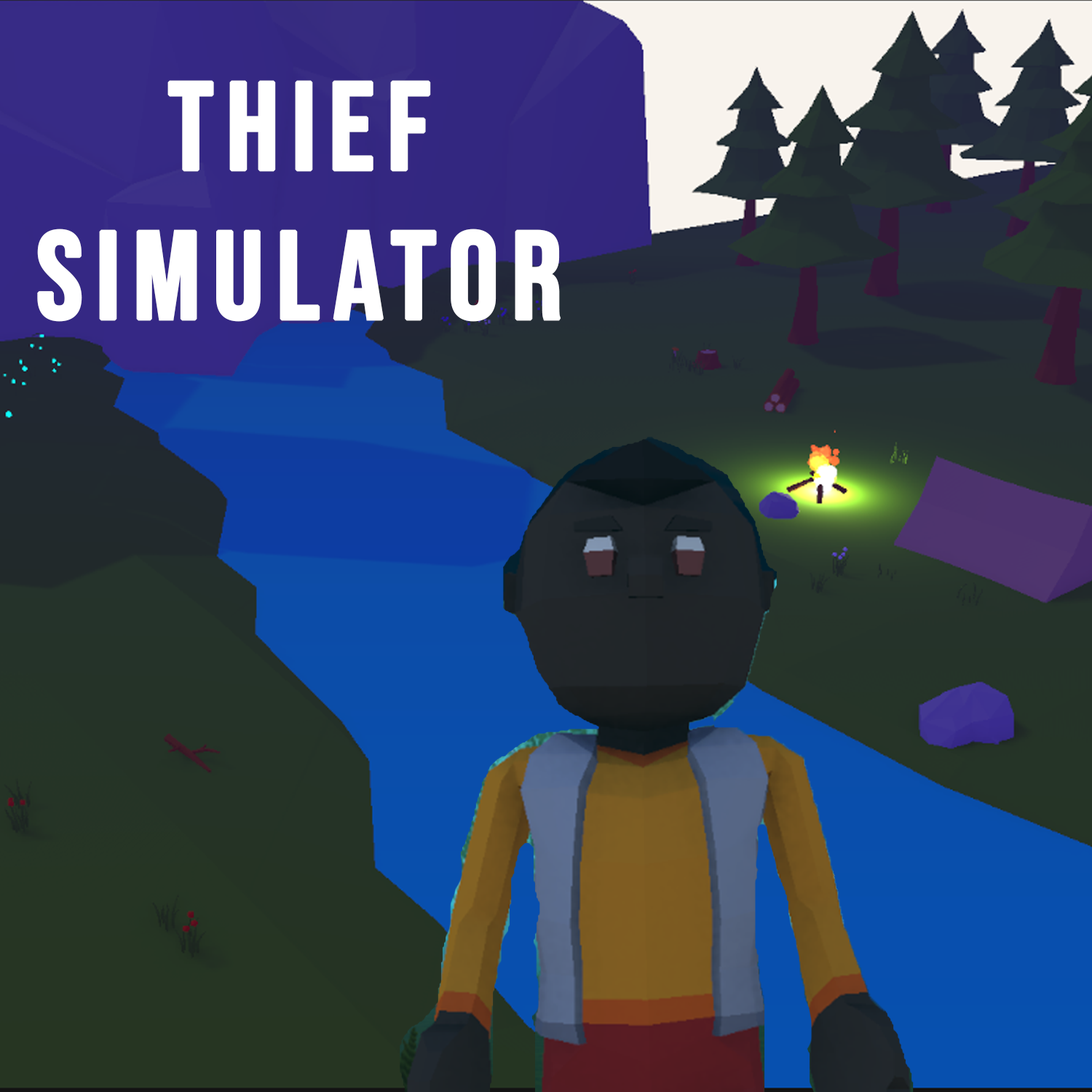
<style>
.page{position:relative;width:1092px;height:1092px}
.page>*{position:absolute;margin:0}
.t1{font:124.4px "BebasNeue-Regular";letter-spacing:0.08em;color:#ffffff;font-weight:bold}
</style>
<div class="page">
<p class="t1" style="left:37px;top:80px;width:524px;height:242px;text-align:center">THIEF<br>SIMULATOR</p>
</div>
